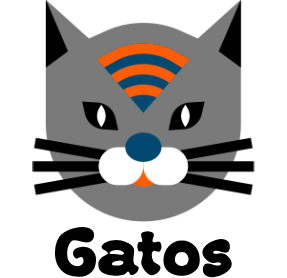
<style>
.page{position:relative;width:287px;height:278px;background:#ffffff}
.page>*{position:absolute;margin:0}
.t1{font:58.3px "Kush-Fat";color:#000000}
</style>
<div class="page">
<p class="t1" style="left:54px;top:226px;width:178px;height:52px">Gatos</p>
</div>
